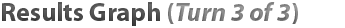
<style>
.page{position:relative;width:345px;height:28px;background:#ffffff}
.page>*{position:absolute;margin:0}
.t1{font:26px "MyriadPro-Bold";color:#464646}
.t2{font:26px "MyriadPro-Bold";color:#898989}
.t3{font:26px "MyriadPro-BoldIt";color:#898989}
</style>
<div class="page">
<p class="t1" style="left:2px;top:2px;width:296px;height:24px">Results Graph <span class="t2">(</span><span class="t3">Turn 3 of 3</span><span class="t2">)</span></p>
</div>
